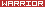
<style>
.page{position:relative;width:45px;height:7px;background:#ba3232}
.page>*{position:absolute;margin:0}
.t1{font:8px "5x5-Pixel";color:#f8fff9}
</style>
<div class="page">
<p class="t1" style="left:2px;top:1px;width:41px;height:5px">warrior</p>
</div>
